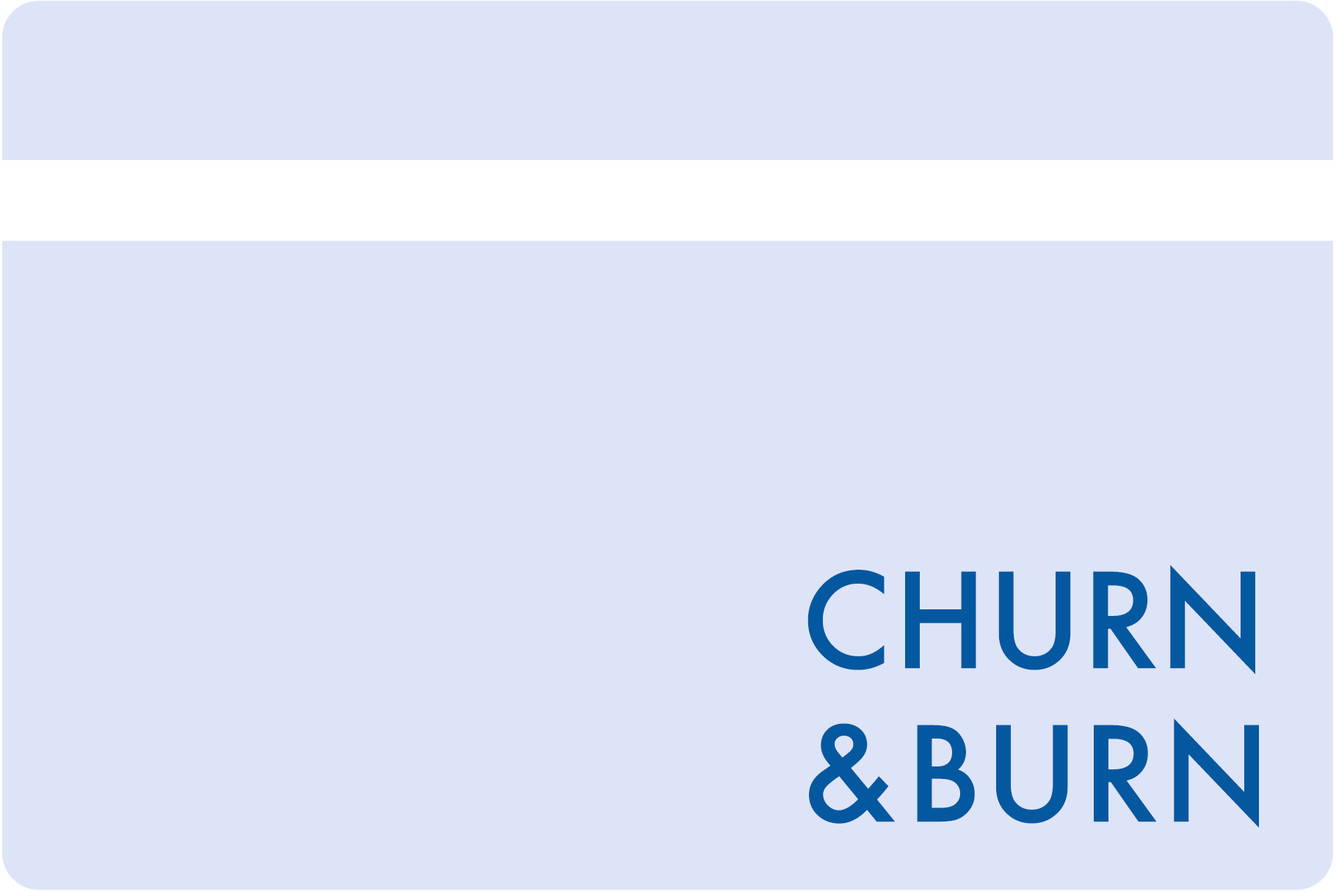
<style>
.page{position:relative;width:1336px;height:892px;background:#dde4f7}
.page>*{position:absolute;margin:0}
.t1{font:127.9px "Futura-Medium";color:#0458a0}
.t2{font:127.9px "Futura-Medium";letter-spacing:0.025em;color:#0458a0}
</style>
<div class="page">
<p class="t1" style="left:808px;top:565px;width:451px;height:263px">CHURN <br>&amp; <span class="t2">BURN</span></p>
</div>
